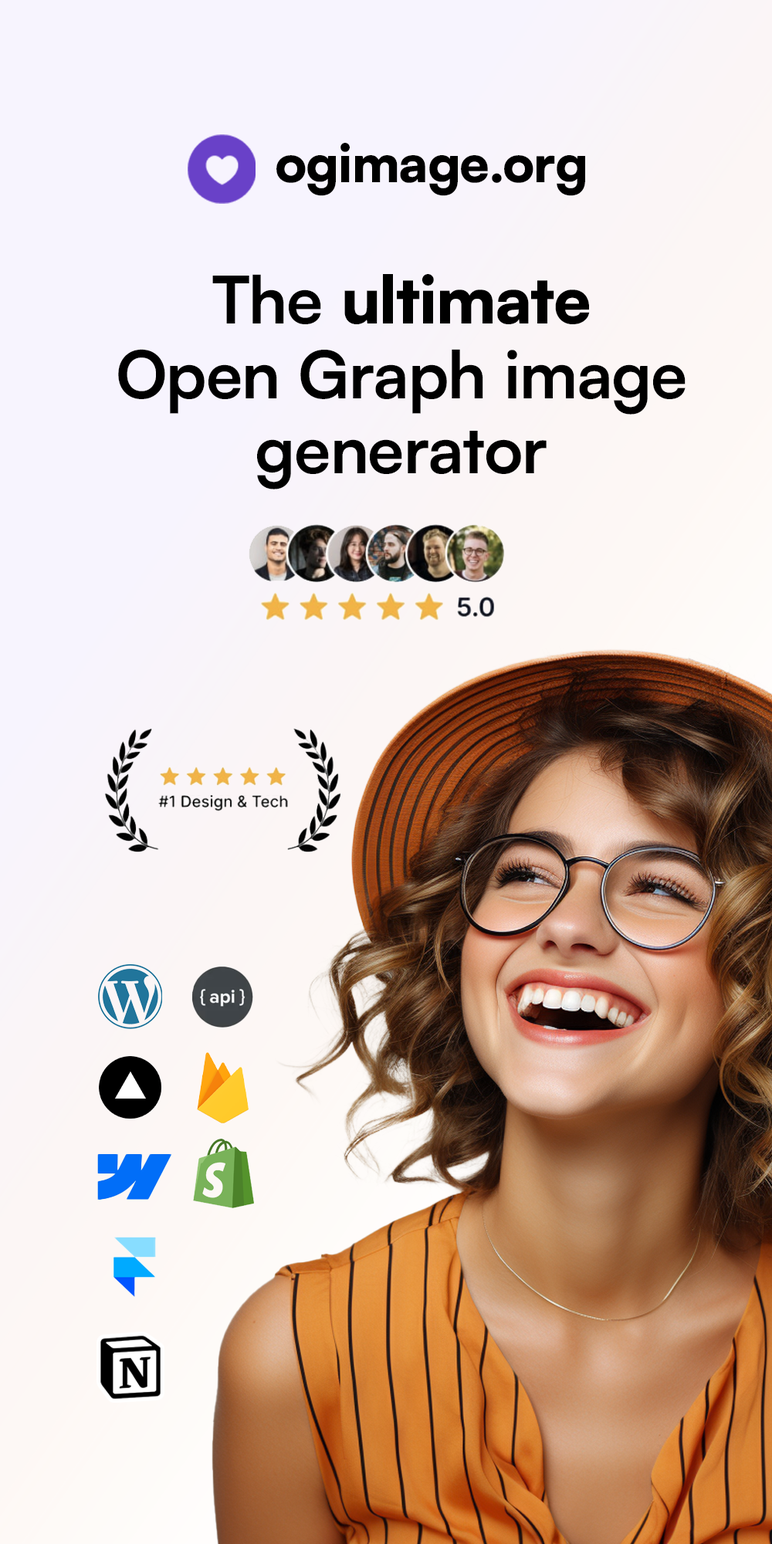
<style>
.page{position:relative;width:772px;height:1544px}
.page>*{position:absolute;margin:0}
.t1{font:52.3px "SatoshiVariable-Bold";color:#000000}
.t2{font:65.6px/75.2px "SatoshiVariable-Bold";color:#000000}
</style>
<div class="page">
<p class="t1" style="left:276px;top:143px;width:309px;height:53px">ogimage.org</p>
<p class="t2" style="left:118px;top:274px;width:568px;height:216px;text-align:center">The ultimate<br>Open Graph image<br>generator</p>
</div>
